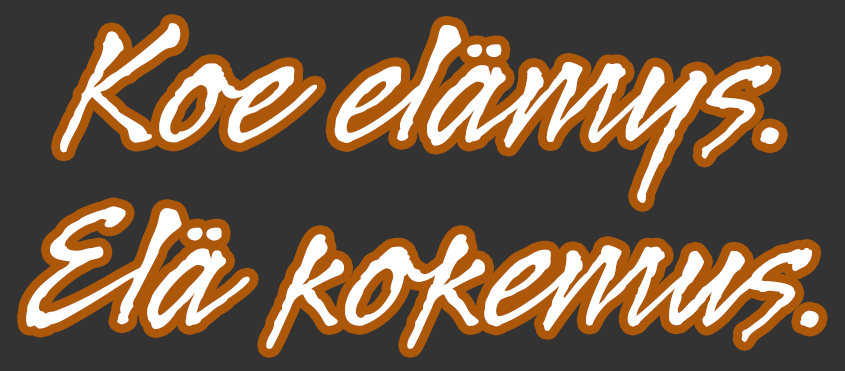
<style>
.page{position:relative;width:845px;height:371px;background:#333333}
.page>*{position:absolute;margin:0}
.t1{font:200px/183.3px "LegaultStd";color:#ffffff}
</style>
<div class="page">
<p class="t1" style="left:26px;top:23px;width:793px;height:326px;text-align:center">Koe elämys.<br>Elä kokemus.</p>
</div>
